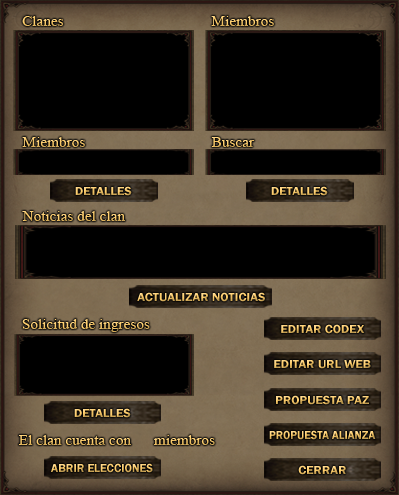
<style>
.page{position:relative;width:399px;height:495px;background:#000000}
.page>*{position:absolute;margin:0}
.t1{font:14px "TimesNewRomanPSMT";scale:1.09 1}
.t2{font:12px "FranklinGothic-Demi";scale:1.07 1}
.t3{font:12px "FranklinGothic-Demi";scale:0.94 1}
.t4{font:12px "FranklinGothic-Demi"}
</style>
<div class="page">
<p class="t1" style="left:22px;top:16px;width:42px;height:10px">Clanes</p>
<p class="t1" style="left:211px;top:16px;width:63px;height:10px">Miembros</p>
<p class="t1" style="left:22px;top:137px;width:63px;height:10px">Miembros</p>
<p class="t1" style="left:211px;top:137px;width:44px;height:10px">Buscar</p>
<p class="t2" style="left:75px;top:186px;width:57px;height:10px">DETALLES</p>
<p class="t2" style="left:271px;top:186px;width:57px;height:10px">DETALLES</p>
<p class="t1" style="left:22px;top:211px;width:103px;height:10px">Noticias del clan</p>
<p class="t2" style="left:137px;top:292px;width:128px;height:10px">ACTUALIZAR NOTICIAS</p>
<p class="t1" style="left:22px;top:319px;width:128px;height:13px">Solicitud de ingresos</p>
<p class="t2" style="left:281px;top:324px;width:84px;height:10px">EDITAR CODEX</p>
<p class="t2" style="left:274px;top:360px;width:97px;height:9px">EDITAR URL WEB</p>
<p class="t2" style="left:276px;top:395px;width:93px;height:10px">PROPUESTA PAZ</p>
<p class="t2" style="left:74px;top:408px;width:57px;height:10px">DETALLES</p>
<p class="t1" style="left:19px;top:435px;width:196px;height:10px">El clan cuenta con      miembros</p>
<p class="t3" style="left:269px;top:430px;width:107px;height:10px">PROPUESTA ALIANZA</p>
<p class="t4" style="left:51px;top:463px;width:102px;height:10px">ABRIR ELECCIONES</p>
<p class="t2" style="left:298px;top:465px;width:48px;height:10px">CERRAR</p>
</div>
